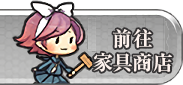
<style>
.page{position:relative;width:183px;height:85px}
.page>*{position:absolute;margin:0}
.t1{font:20px/24px "RyuminPr6N-ExBold";color:#fdf2ed}
</style>
<div class="page">
<p class="t1" style="left:93px;top:29px;width:79px;height:44px;text-align:center">前往<br>家具商店</p>
</div>
